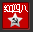
<style>
.page{position:relative;width:33px;height:32px;background:#c50000}
.page>*{position:absolute;margin:0}
.t1{font:10.4px "SimSun";letter-spacing:-0.25em;color:#ffffff}
</style>
<div class="page">
<p class="t1" style="left:4px;top:4px;width:24px;height:9px">红四八</p>
</div>
